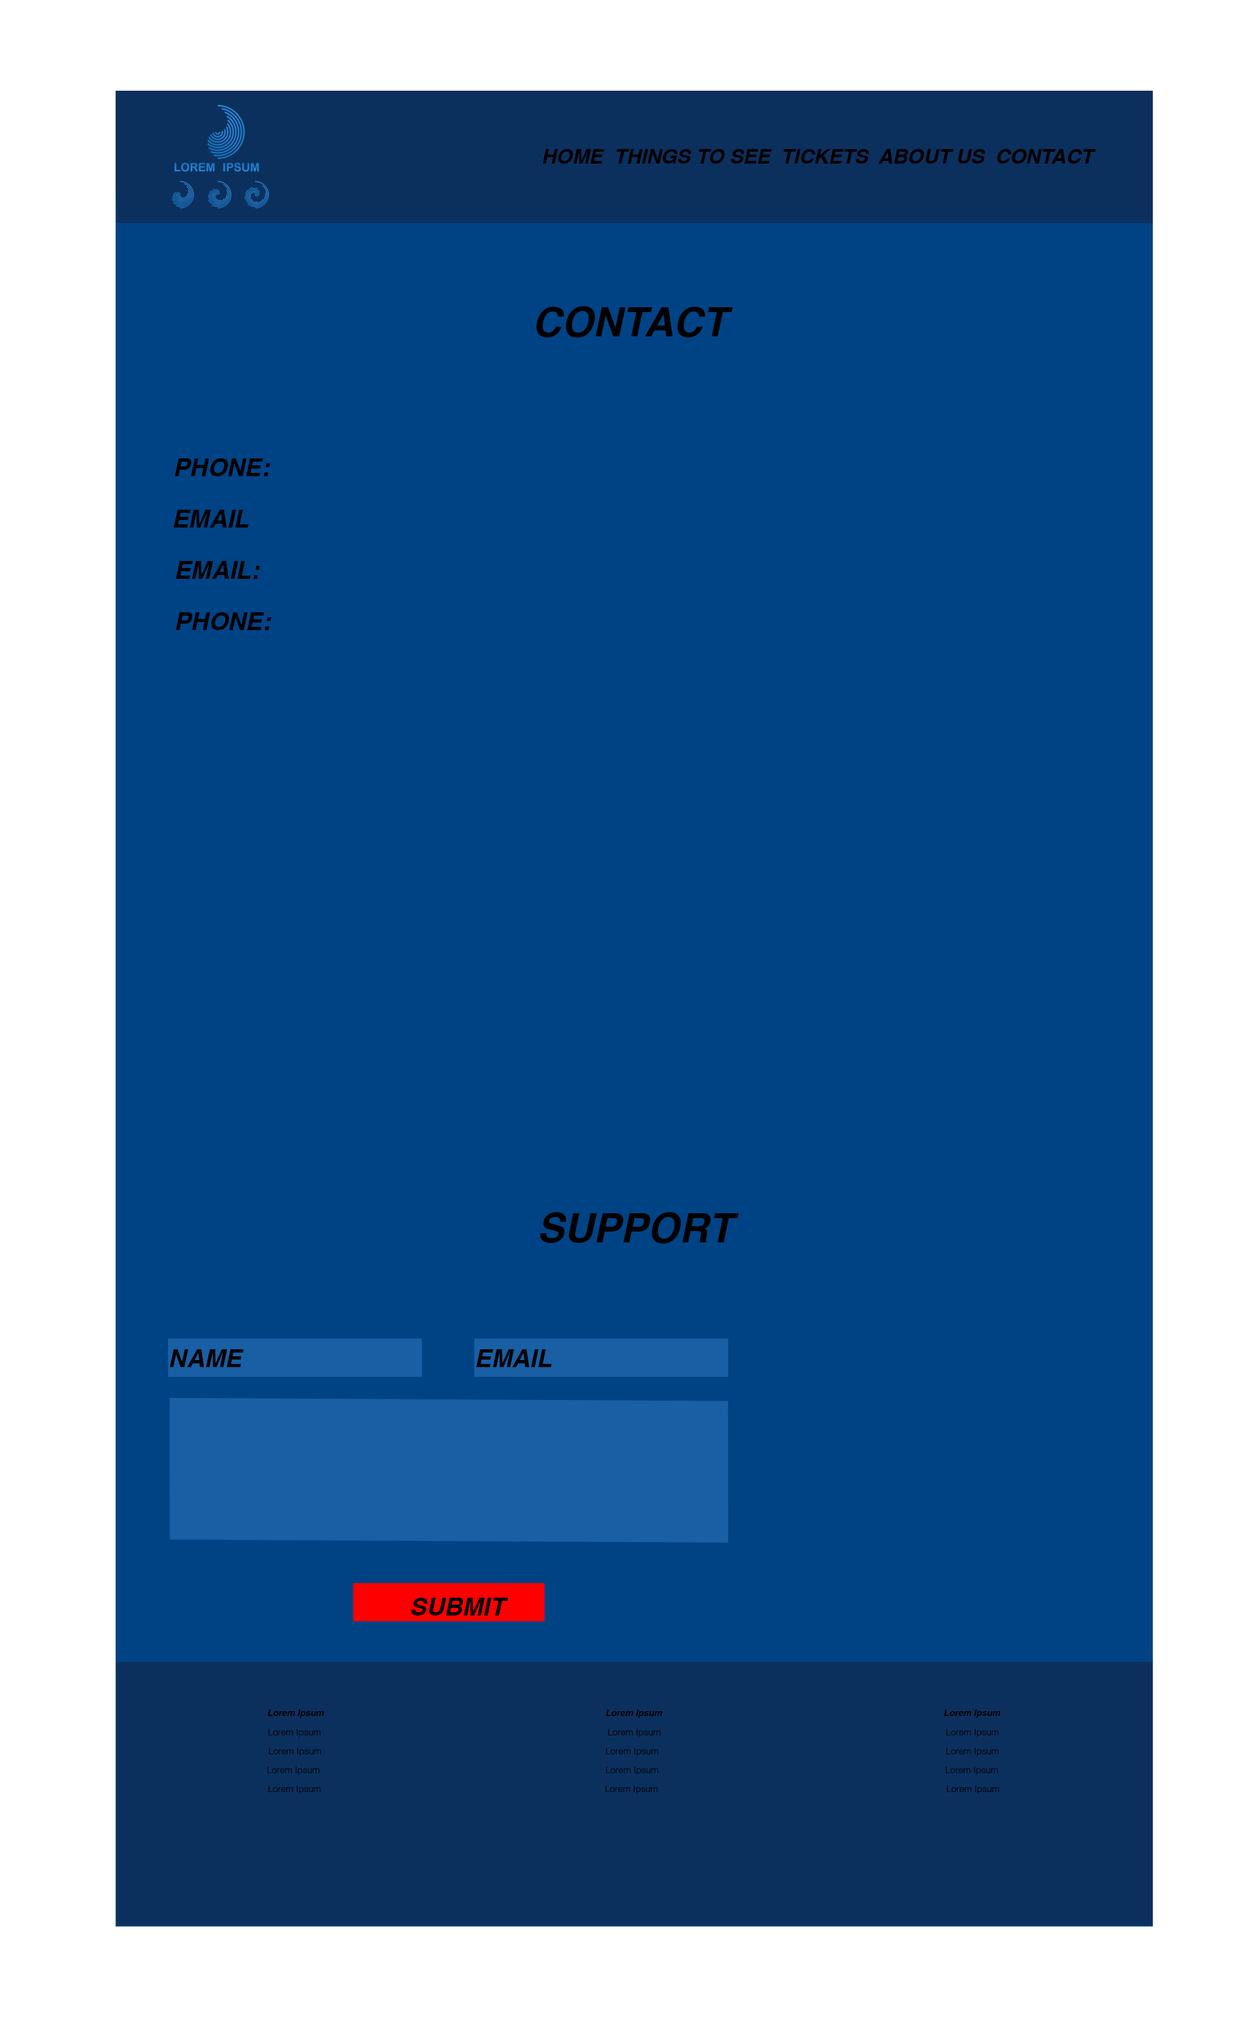
<style>
.page{position:relative;width:1236px;height:2028px;background:#004385}
.page>*{position:absolute;margin:0}
.t1{font:20.2px "Helvetica-BoldOblique";color:#000000}
.t2{font:40.5px "Helvetica-BoldOblique";color:#000000}
.t3{font:24.7px "Helvetica-BoldOblique";color:#000000}
.t4{font:9px "Helvetica-BoldOblique";color:#000000}
.t5{font:9px "Helvetica-Light";color:#000000}
</style>
<div class="page">
<p class="t1" style="left:542px;top:149px;width:554px;height:15px">HOME  THINGS TO SEE  TICKETS  ABOUT US  CONTACT</p>
<p class="t2" style="left:536px;top:306px;width:197px;height:31px">CONTACT</p>
<p class="t3" style="left:174px;top:458px;width:96px;height:18px">PHONE:</p>
<p class="t3" style="left:173px;top:510px;width:76px;height:18px">EMAIL</p>
<p class="t3" style="left:175px;top:561px;width:85px;height:18px">EMAIL:</p>
<p class="t3" style="left:175px;top:612px;width:96px;height:18px">PHONE:</p>
<p class="t2" style="left:540px;top:1212px;width:199px;height:32px">SUPPORT</p>
<p class="t3" style="left:170px;top:1349px;width:74px;height:18px">NAME</p>
<p class="t3" style="left:476px;top:1349px;width:76px;height:18px">EMAIL</p>
<p class="t3" style="left:411px;top:1598px;width:97px;height:18px">SUBMIT</p>
<p class="t4" style="left:267px;top:1710px;width:57px;height:8px">Lorem Ipsum</p>
<p class="t4" style="left:605px;top:1710px;width:57px;height:8px">Lorem Ipsum</p>
<p class="t4" style="left:943px;top:1710px;width:57px;height:8px">Lorem Ipsum</p>
<p class="t5" style="left:268px;top:1729px;width:53px;height:8px">Lorem Ipsum</p>
<p class="t5" style="left:608px;top:1729px;width:52px;height:8px">Lorem Ipsum</p>
<p class="t5" style="left:946px;top:1729px;width:52px;height:8px">Lorem Ipsum</p>
<p class="t5" style="left:269px;top:1748px;width:52px;height:8px">Lorem Ipsum</p>
<p class="t5" style="left:606px;top:1748px;width:52px;height:8px">Lorem Ipsum</p>
<p class="t5" style="left:946px;top:1748px;width:52px;height:8px">Lorem Ipsum</p>
<p class="t5" style="left:267px;top:1767px;width:53px;height:8px">Lorem Ipsum</p>
<p class="t5" style="left:606px;top:1767px;width:52px;height:8px">Lorem Ipsum</p>
<p class="t5" style="left:946px;top:1767px;width:52px;height:8px">Lorem Ipsum</p>
<p class="t5" style="left:268px;top:1786px;width:53px;height:8px">Lorem Ipsum</p>
<p class="t5" style="left:605px;top:1786px;width:53px;height:8px">Lorem Ipsum</p>
<p class="t5" style="left:947px;top:1786px;width:52px;height:8px">Lorem Ipsum</p>
</div>
